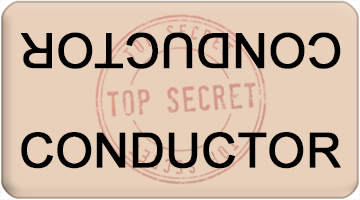
<style>
.page{position:relative;width:360px;height:200px;background:#e8d0bb}
.page>*{position:absolute;margin:0}
.t1{font:48px "ArialMT";color:#000000;font-weight:bold}
</style>
<div class="page">
<p class="t1" style="left:21px;top:32px;width:320px;height:37px;rotate:180deg">CONDUCTOR</p>
<p class="t1" style="left:21px;top:132px;width:320px;height:37px">CONDUCTOR</p>
</div>
